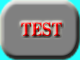
<style>
.page{position:relative;width:80px;height:60px;background:#808080}
.page>*{position:absolute;margin:0}
.t1{font:18px "MyungjoXB-HM"}
</style>
<div class="page">
<p class="t1" style="left:21px;top:22px;width:41px;height:14px">TEST</p>
</div>
